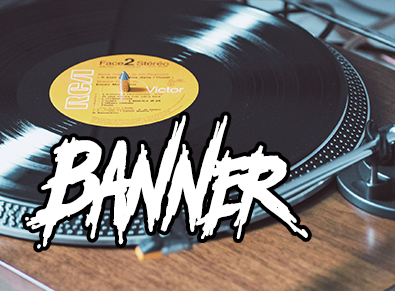
<style>
.page{position:relative;width:395px;height:291px}
.page>*{position:absolute;margin:0}
.t1{font:142.5px "AnotherAmerica";color:#ffffff;font-weight:bold;scale:0.87 1}
</style>
<div class="page">
<p class="t1" style="left:25px;top:115px;width:283px;height:134px">Banner</p>
</div>
